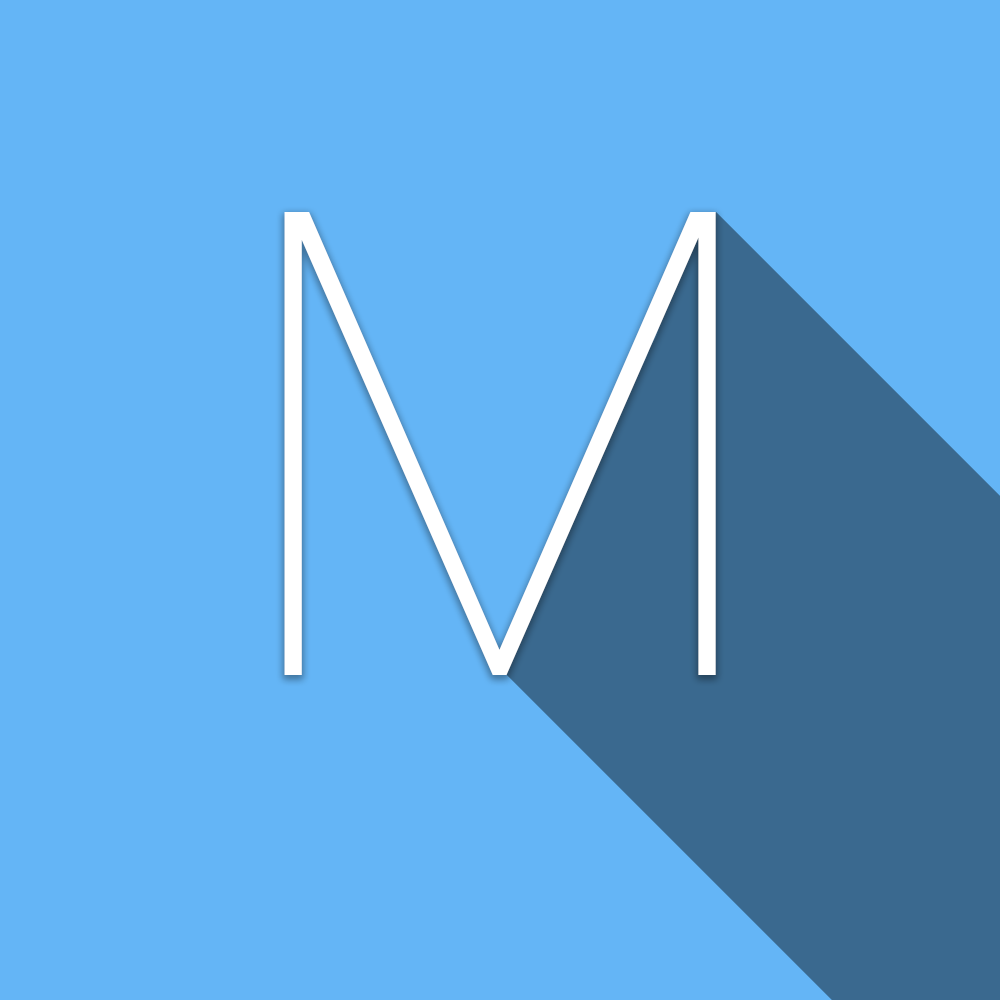
<style>
.page{position:relative;width:1000px;height:1000px;background:#64b5f6}
.page>*{position:absolute;margin:0}
.t1{font:650.7px "Roboto-Thin";color:#ffffff}
</style>
<div class="page">
<p class="t1" style="left:284px;top:212px;width:432px;height:463px">M</p>
</div>
